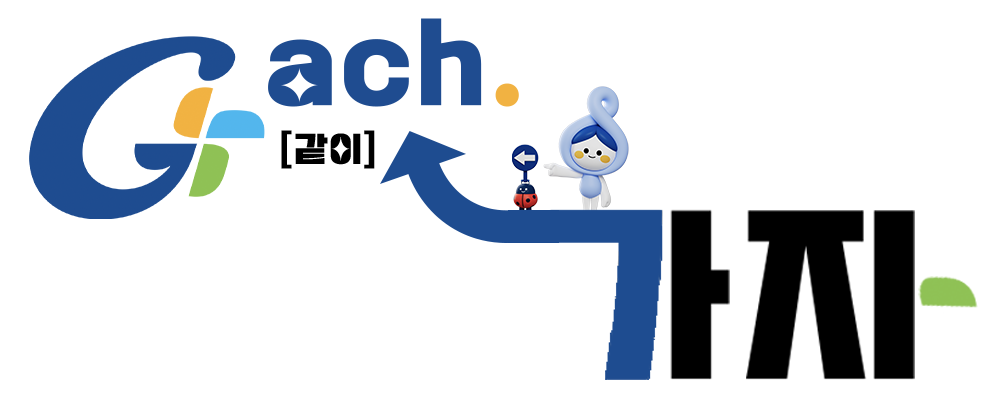
<style>
.page{position:relative;width:1000px;height:400px;background:#ffffff}
.page>*{position:absolute;margin:0}
.t1{font:102.4px "PyeongChangPeace-Bold";letter-spacing:0.05em;color:#1f4c90}
.t2{font:102.4px "PyeongChangPeace-Bold";letter-spacing:0.05em;color:#f1b242}
.t3{font:35.6px "PyeongChangPeace-Bold";letter-spacing:0.05em;color:#000000}
</style>
<div class="page">
<p class="t1" style="left:268px;top:18px;width:251px;height:89px">ach<span class="t2">.</span></p>
<p class="t3" style="left:281px;top:130px;width:94px;height:39px">[같이]</p>
</div>
